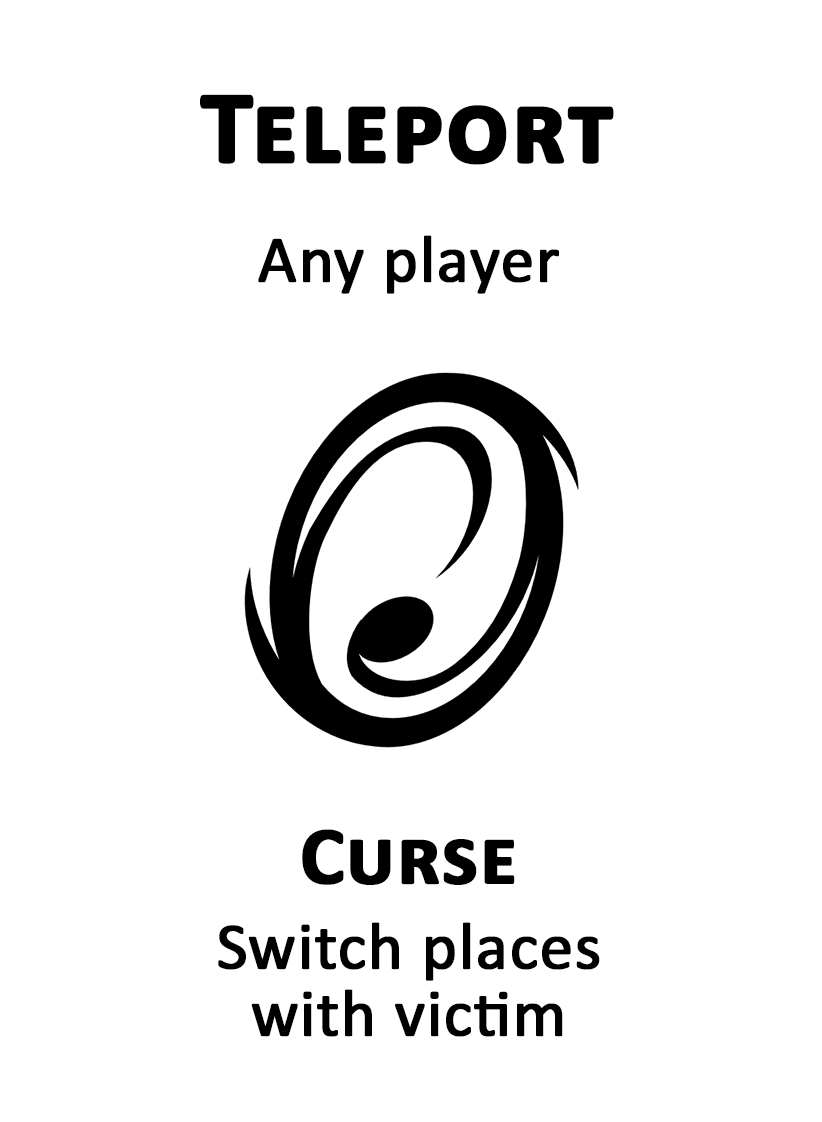
<style>
.page{position:relative;width:822px;height:1122px;background:#ffffff}
.page>*{position:absolute;margin:0}
.t1{font:104.2px "Calibri-Bold";color:#000000;font-variant:small-caps;font-weight:bold}
.t2{font:66.7px "Calibri";color:#000000;font-weight:bold}
.t3{font:83.3px "Calibri-Bold";color:#000000;font-variant:small-caps;font-weight:bold}
.t4{font:66.7px/66.7px "Calibri";color:#000000;font-weight:bold}
</style>
<div class="page">
<p class="t1" style="left:200px;top:94px;width:414px;height:71px">Teleport</p>
<p class="t2" style="left:258px;top:235px;width:301px;height:59px">Any player</p>
<p class="t3" style="left:302px;top:829px;width:213px;height:56px">Curse</p>
<p class="t4" style="left:218px;top:922px;width:382px;height:115px;text-align:center">Switch places<br>with victim</p>
</div>
